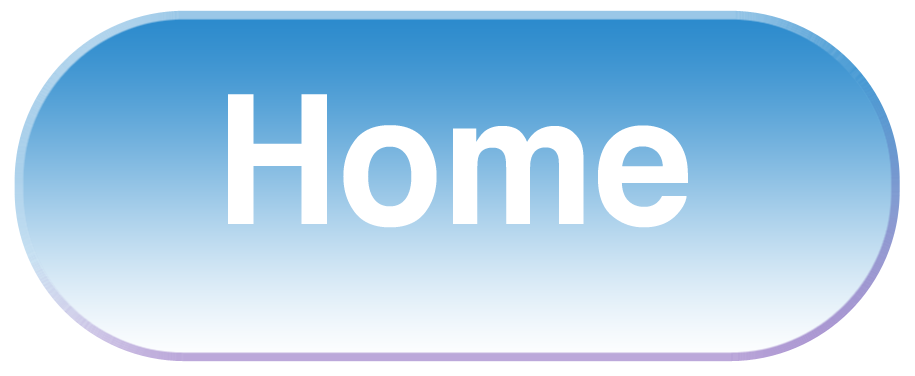
<style>
.page{position:relative;width:915px;height:376px;background:#ffffff}
.page>*{position:absolute;margin:0}
.t1{font:180px "Helvetica-Bold";color:#ffffff;scale:0.95 1}
</style>
<div class="page">
<p class="t1" style="left:228px;top:94px;width:460px;height:134px">Home</p>
</div>
